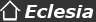
<style>
.page{position:relative;width:96px;height:22px;background:#333333}
.page>*{position:absolute;margin:0}
.t1{font:18px "Verdana-BoldItalic";color:#ffffff}
</style>
<div class="page">
<p class="t1" style="left:24px;top:4px;width:70px;height:14px">Eclesia</p>
</div>
